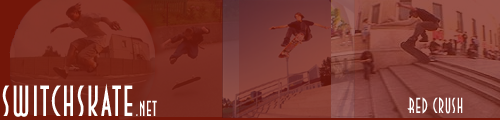
<style>
.page{position:relative;width:500px;height:120px}
.page>*{position:absolute;margin:0}
.t1{font:43.2px "DecoTechTL";letter-spacing:0.05em;color:#ffffff;scale:0.83 1}
.t2{font:21.6px "DecoTechTL";letter-spacing:0.05em;color:#ffffff;scale:0.83 1}
</style>
<div class="page">
<p class="t1" style="left:2px;top:83px;width:155px;height:34px">SWITchskate<span class="t2">.net</span></p>
<p class="t2" style="left:407px;top:97px;width:56px;height:17px">Red crush</p>
</div>
